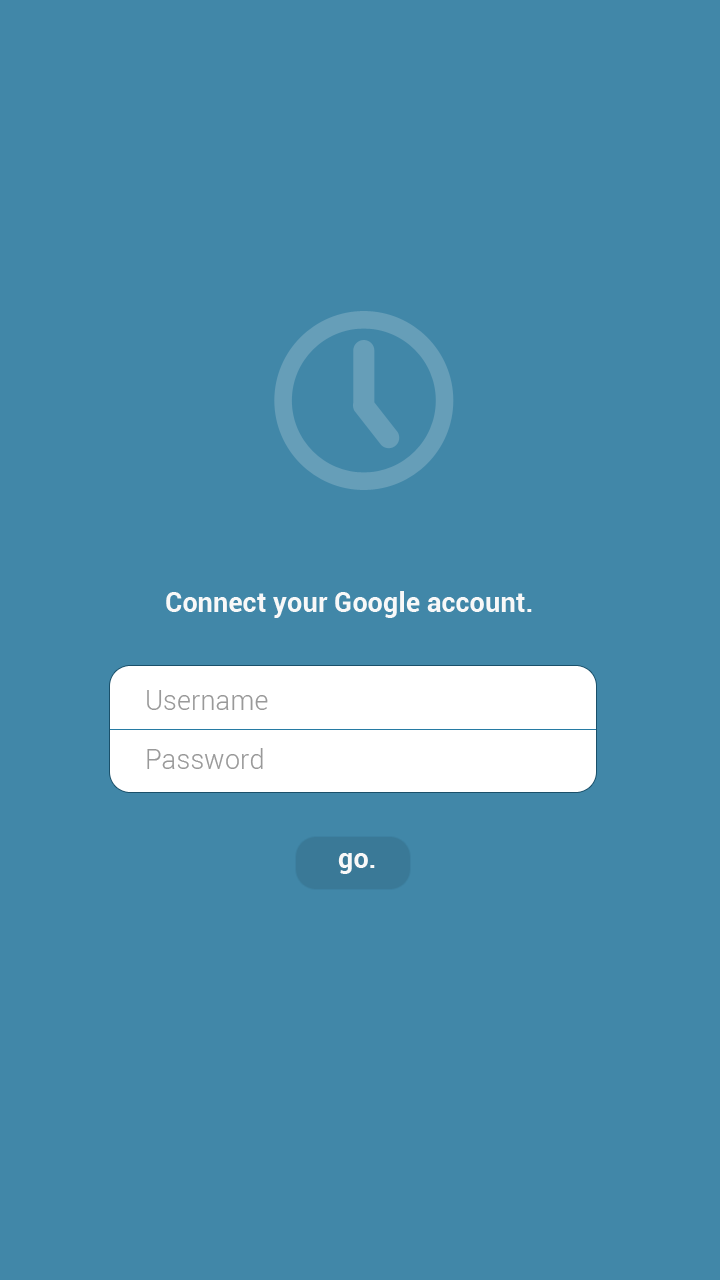
<style>
.page{position:relative;width:720px;height:1280px;background:#4187a8}
.page>*{position:absolute;margin:0}
.t1{font:27.3px "Roboto-Bold";color:#f8f8f8}
.t2{font:27.3px "Roboto-Light";color:#999999}
</style>
<div class="page">
<p class="t1" style="left:166px;top:591px;width:366px;height:27px">Connect your Google account.</p>
<p class="t2" style="left:147px;top:690px;width:121px;height:20px">Username</p>
<p class="t2" style="left:147px;top:748px;width:116px;height:21px">Password</p>
<p class="t1" style="left:338px;top:853px;width:37px;height:21px">go.</p>
</div>
